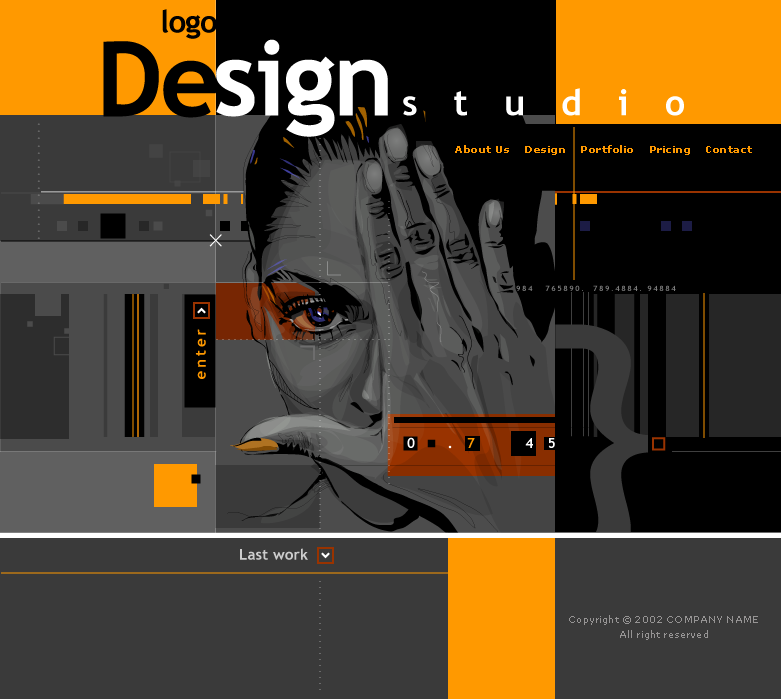
<style>
.page{position:relative;width:781px;height:699px;background:#000000}
.page>*{position:absolute;margin:0}
.t1{font:31.1px "TrebuchetMS-Bold";letter-spacing:-0.025em;color:#000000}
.t2{font:104px "TrebuchetMS-Bold";letter-spacing:-0.025em;color:#000000}
.t3{font:104px "TrebuchetMS-Bold";letter-spacing:-0.025em;color:#ffffff}
.t4{font:36px "TrebuchetMS-Bold";letter-spacing:1em;color:#ffffff}
.t5{font:14px "TrebuchetMS-Bold";letter-spacing:1em;scale:0.37 1}
.t6{font:10px "Verdana-Bold";letter-spacing:0.05em;color:#ff9900}
.t7{font:7.6px "TrebuchetMS-Bold";letter-spacing:0.2em;color:#7c7c7c}
.t8{font:15px "TrebuchetMS-Bold";letter-spacing:0.2em;color:#ff9900}
.t9{font:15px "TrebuchetMS-Bold";letter-spacing:0.01em;color:#cccccc}
.t10{font:9px/15px "Verdana";letter-spacing:0.02em;color:#969494}
</style>
<div class="page">
<p class="t1" style="left:162px;top:9px;width:55px;height:30px">logo</p>
<p class="t2" style="left:103px;top:41px;width:114px;height:77px">De</p>
<p class="t3" style="left:216px;top:39px;width:172px;height:98px">sign</p>
<p class="t4" style="left:403px;top:88px;width:281px;height:28px">studio</p>
<p class="t5" style="left:37px;top:123px;width:3px;height:116px;rotate:-90deg">.................</p>
<p class="t6" style="left:455px;top:145px;width:297px;height:10px">About Us    Design    Portfolio    Pricing    Contact</p>
<p class="t7" style="left:516px;top:285px;width:160px;height:6px">984   765890.  789.4884. 94884</p>
<p class="t8" style="left:195px;top:329px;width:11px;height:50px;rotate:-90deg">enter</p>
<p class="t9" style="left:240px;top:548px;width:68px;height:12px">Last work</p>
<p class="t10" style="left:569px;top:615px;width:189px;height:25px;text-align:center">Copyright © 2002 COMPANY NAME<br>All right reserved</p>
</div>
